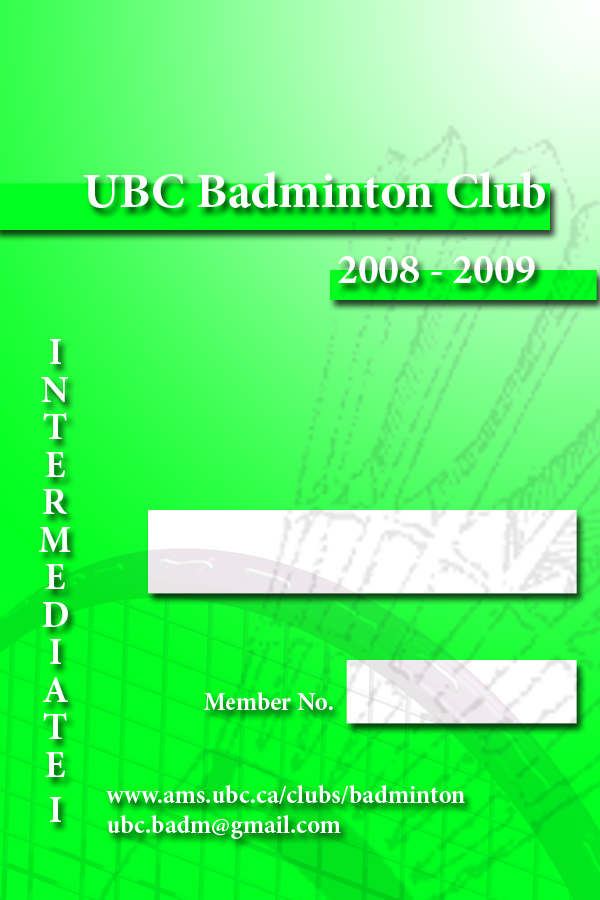
<style>
.page{position:relative;width:600px;height:900px}
.page>*{position:absolute;margin:0}
.t1{font:50px "MinionPro-Bold";color:#ffffff}
.t2{font:41.7px "MinionPro-Bold";color:#ffffff}
.t3{font:37.5px "MinionPro-Bold";color:#ffffff}
.t4{font:25px "MinionPro-Bold";color:#ffffff}
</style>
<div class="page">
<p class="t1" style="left:84px;top:171px;width:461px;height:37px">UBC Badminton Club</p>
<p class="t2" style="left:338px;top:256px;width:197px;height:27px">2008 - 2009</p>
<p class="t3" style="left:39px;top:339px;width:32px;height:483px">INTERMEDIATE I <span class="t2">II</span></p>
<p class="t4" style="left:204px;top:692px;width:129px;height:18px">Member No.</p>
<p class="t4" style="left:106px;top:785px;width:359px;height:54px">www.ams.ubc.ca/clubs/badminton<br>ubc.badm@gmail.com</p>
</div>
